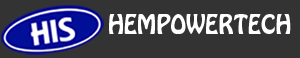
<style>
.page{position:relative;width:300px;height:58px;background:#333333}
.page>*{position:absolute;margin:0}
.t1{font:23.4px "HoboStd";color:#ffffff;scale:0.95 1}
</style>
<div class="page">
<p class="t1" style="left:109px;top:14px;width:182px;height:20px">HEMPOWERTECH</p>
</div>
